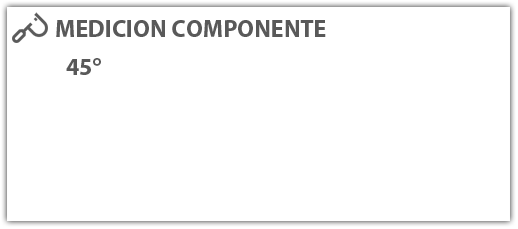
<style>
.page{position:relative;width:518px;height:229px;background:#ffffff}
.page>*{position:absolute;margin:0}
.t1{font:24px "MyriadPro-Bold";color:#595959}
</style>
<div class="page">
<p class="t1" style="left:56px;top:20px;width:270px;height:17px">MEDICION COMPONENTE</p>
<p class="t1" style="left:66px;top:58px;width:35px;height:17px">45°</p>
</div>
